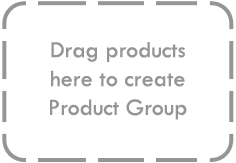
<style>
.page{position:relative;width:236px;height:163px;background:#ffffff}
.page>*{position:absolute;margin:0}
.t1{font:24px "TwCenMT-Regular";color:#959595}
</style>
<div class="page">
<p class="t1" style="left:50px;top:42px;width:137px;height:78px;text-align:center">Drag products <br>here to create <br>Product Group</p>
</div>
